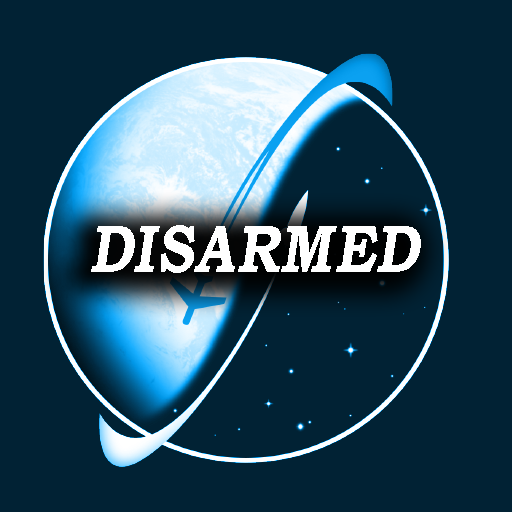
<style>
.page{position:relative;width:512px;height:512px;background:#012234}
.page>*{position:absolute;margin:0}
.t1{font:66.9px "BookmanOldStyle-Bold";letter-spacing:0.013em;color:#ffffff;font-style:italic;scale:0.84 1}
</style>
<div class="page">
<p class="t1" style="left:91px;top:225px;width:330px;height:48px">DISARMED</p>
</div>
